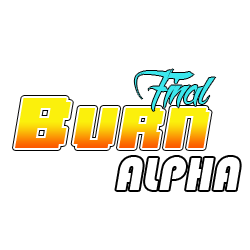
<style>
.page{position:relative;width:250px;height:250px;background:#ffffff}
.page>*{position:absolute;margin:0}
.t1{font:85px "DeathintheShadow";color:#3ce7ed;font-style:italic;scale:0.96 1}
.t2{font:48px "Bauhaus93";color:#ffffff;font-style:italic;scale:0.96 1}
</style>
<div class="page">
<p class="t1" style="left:134px;top:69px;width:82px;height:42px">Final</p>
<p class="t2" style="left:116px;top:157px;width:124px;height:33px">ALPHA</p>
</div>
